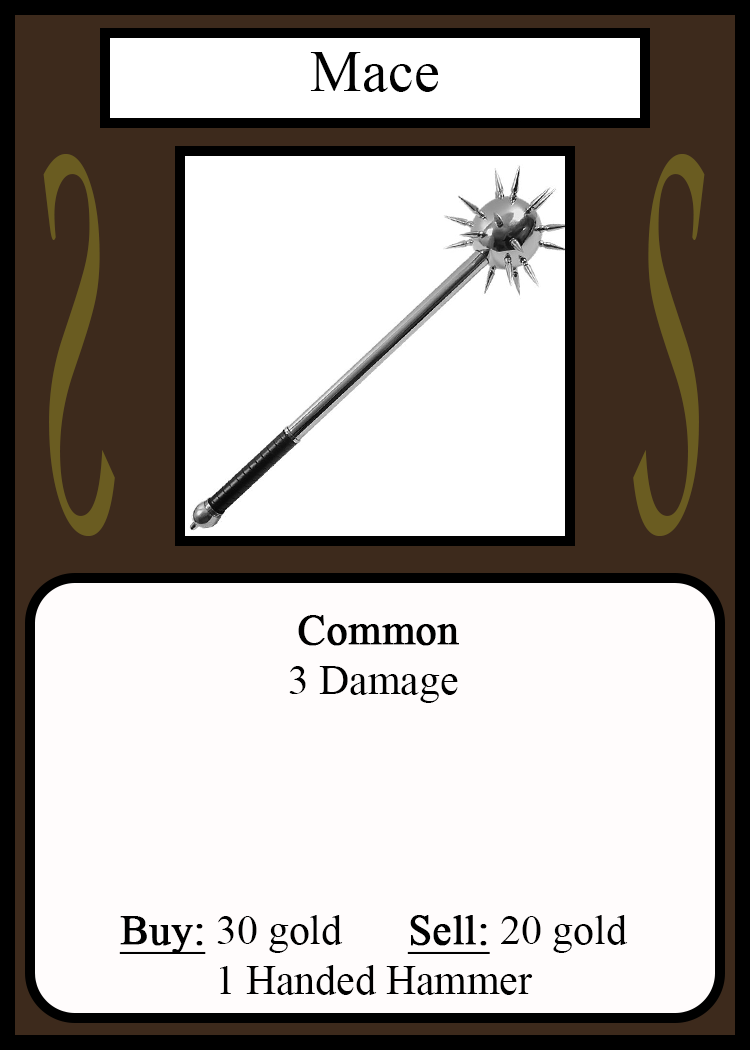
<style>
.page{position:relative;width:750px;height:1050px;background:#fffcfc}
.page>*{position:absolute;margin:0}
.t1{font:58.3px "TimesNewRomanPSMT";color:#010101}
.t2{font:548.5px "Apple-Chancery";color:#6a5c21;scale:0.27 1}
.t3{font:548.2px "Apple-Chancery";color:#6a5c21;scale:0.27 1}
.t4{font:41.7px "TimesNewRomanPSMT";color:#000000}
.t5{font:41.7px "TimesNewRomanPSMT";color:#000000;font-weight:bold}
.t6{font:41.7px "TimesNewRomanPSMT";color:#000000;font-weight:bold;text-decoration:underline}
</style>
<div class="page">
<p class="t1" style="left:310px;top:52px;width:129px;height:40px">Mace</p>
<p class="t2" style="left:43px;top:154px;width:72px;height:382px;rotate:180deg">S</p>
<p class="t3" style="left:633px;top:154px;width:72px;height:382px">S</p>
<p class="t4" style="left:119px;top:615px;width:509px;height:380px;text-align:center"><span class="t5">Common<br></span>3 Damage<br><br><br><br><br><span class="t6">Buy:</span> 30 gold   <span class="t6">Sell:</span> 20 gold<br>1 Handed Hammer</p>
</div>
